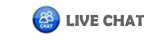
<style>
.page{position:relative;width:150px;height:40px;background:#ffffff}
.page>*{position:absolute;margin:0}
.t1{font:16px "BerlinSansFBDemi-Bold";color:#626262}
</style>
<div class="page">
<p class="t1" style="left:66px;top:14px;width:78px;height:13px">LIVE CHAT</p>
</div>
